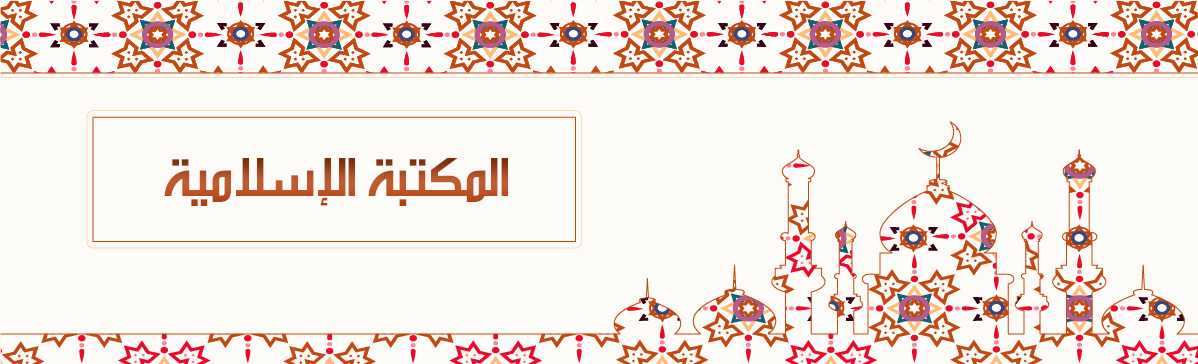
<style>
.page{position:relative;width:1198px;height:364px;background:#fdfbf8}
.page>*{position:absolute;margin:0}
.t1{font:65px "AlarabiyaFont-Normal";color:#c95d2d}
</style>
<div class="page">
<p class="t1" style="left:164px;top:158px;width:344px;height:48px">المكتبة الإسلامية</p>
</div>
